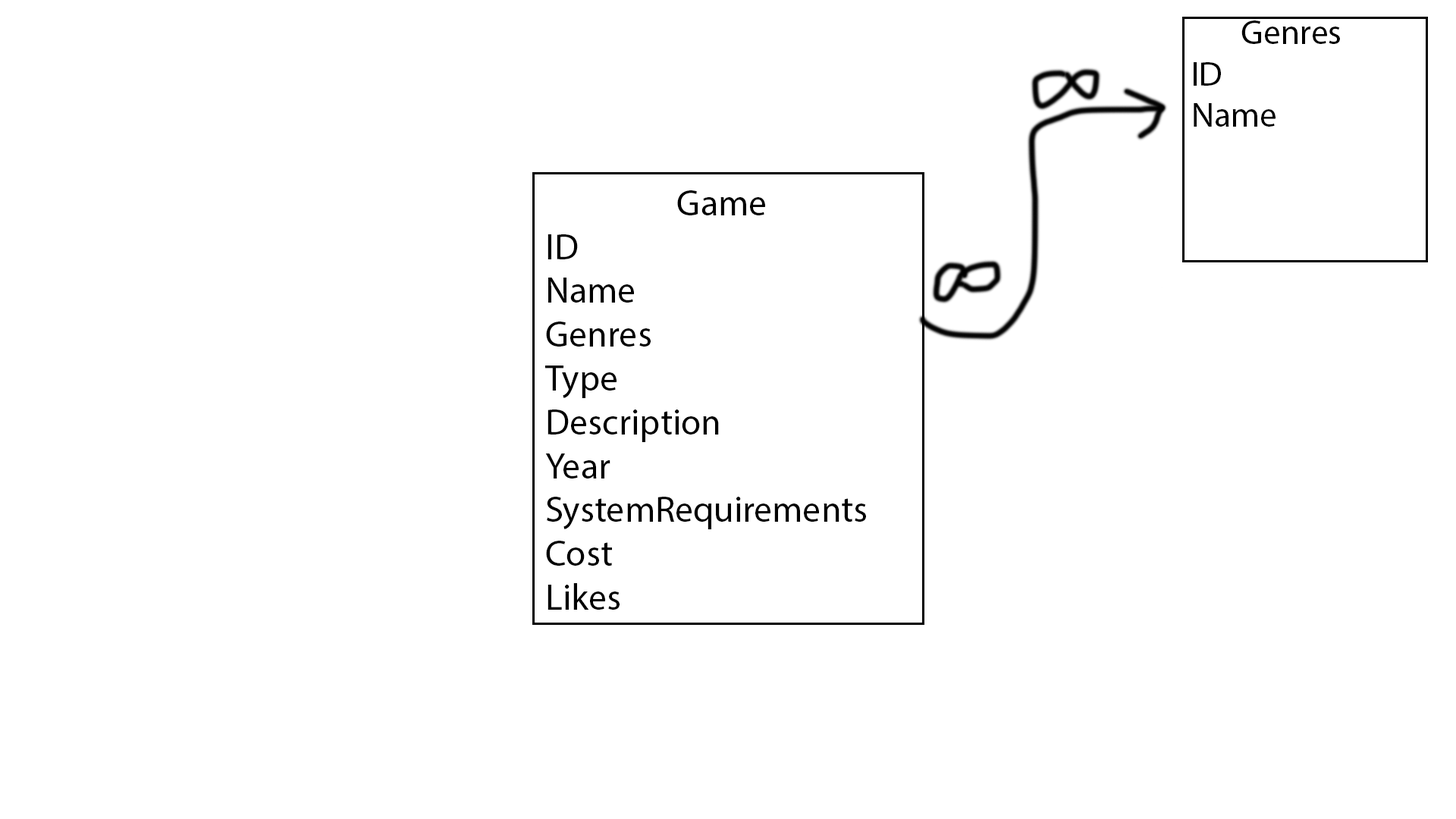
<style>
.page{position:relative;width:1456px;height:819px;background:#ffffff}
.page>*{position:absolute;margin:0}
.t1{font:34.6px "MyriadPro-Regular";color:#000000}
.t2{font:36.5px "MyriadPro-Regular";color:#000000}
</style>
<div class="page">
<p class="t1" style="left:1194px;top:20px;width:146px;height:107px">Genres<br>ID<br>Name</p>
<p class="t2" style="left:545px;top:190px;width:321px;height:420px">Game<br>ID<br>Name<br>Genres<br>Type<br>Description<br>Year<br>SystemRequirements<br>Cost<br>Likes</p>
</div>
